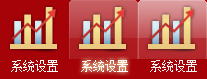
<style>
.page{position:relative;width:207px;height:79px;background:#a60308}
.page>*{position:absolute;margin:0}
.t1{font:12px "NSimSun";color:#fdfafa}
</style>
<div class="page">
<p class="t1" style="left:11px;top:60px;width:47px;height:12px">系统设置</p>
<p class="t1" style="left:81px;top:60px;width:47px;height:12px">系统设置</p>
<p class="t1" style="left:150px;top:60px;width:47px;height:12px">系统设置</p>
</div>
